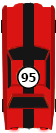
<style>
.page{position:relative;width:56px;height:133px;background:#da1313}
.page>*{position:absolute;margin:0}
.t1{font:12px "Tahoma-Bold";color:#000000}
</style>
<div class="page">
<p class="t1" style="left:21px;top:73px;width:15px;height:9px">95</p>
</div>
